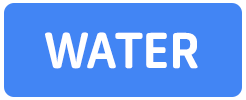
<style>
.page{position:relative;width:246px;height:100px;background:#4285f4}
.page>*{position:absolute;margin:0}
.t1{font:48px "FNBSans-Bold";letter-spacing:0.025em;color:#ffffff}
</style>
<div class="page">
<p class="t1" style="left:45px;top:32px;width:153px;height:37px">WATER</p>
</div>
